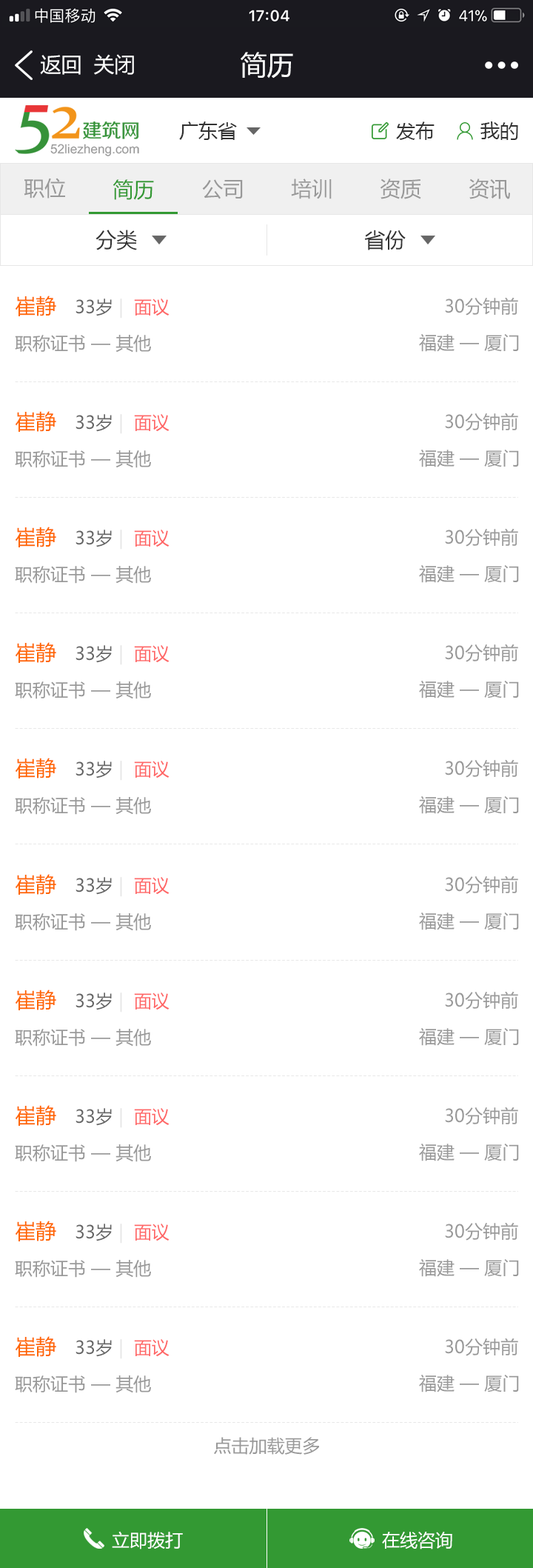
<style>
.page{position:relative;width:533px;height:1568px;background:#ffffff}
.page>*{position:absolute;margin:0}
.t1{font:26.7px "MicrosoftYaHei";color:#ffffff}
.t2{font:20.7px "MicrosoftYaHei";color:#ffffff}
.t3{font:19.3px "MicrosoftYaHei";color:#333333}
.t4{font:20.7px "MicrosoftYaHei";color:#999999}
.t5{font:20.7px "MicrosoftYaHei";color:#339933}
.t6{font:20.7px "MicrosoftYaHei";color:#333333}
.t7{font:20.7px "MicrosoftYaHei";color:#ff6600}
.t8{font:17.8px "MicrosoftYaHei";color:#666666}
.t9{font:17.8px "MicrosoftYaHei";color:#e7e7e7}
.t10{font:17.8px "MicrosoftYaHei";color:#ff6666}
.t11{font:17.8px "MicrosoftYaHei";color:#999999}
.t12{font:17.8px "MicrosoftYaHei";color:#ffffff}
</style>
<div class="page">
<p class="t1" style="left:241px;top:52px;width:52px;height:27px">简历</p>
<p class="t2" style="left:40px;top:55px;width:41px;height:20px">返回</p>
<p class="t2" style="left:94px;top:54px;width:40px;height:21px">关闭</p>
<p class="t3" style="left:179px;top:121px;width:58px;height:19px">广东省</p>
<p class="t3" style="left:396px;top:121px;width:39px;height:19px">发布</p>
<p class="t3" style="left:481px;top:121px;width:37px;height:19px">我的</p>
<p class="t4" style="left:24px;top:178px;width:41px;height:20px">职位</p>
<p class="t5" style="left:113px;top:179px;width:41px;height:21px">简历</p>
<p class="t4" style="left:202px;top:179px;width:41px;height:20px">公司</p>
<p class="t4" style="left:291px;top:179px;width:41px;height:20px">培训</p>
<p class="t4" style="left:380px;top:179px;width:41px;height:20px">资质</p>
<p class="t4" style="left:469px;top:179px;width:41px;height:20px">资讯</p>
<p class="t6" style="left:96px;top:230px;width:41px;height:20px">分类</p>
<p class="t6" style="left:364px;top:230px;width:42px;height:20px">省份</p>
<p class="t7" style="left:15px;top:296px;width:41px;height:20px">崔静</p>
<p class="t8" style="left:76px;top:298px;width:94px;height:20px">33岁 <span class="t9">|  </span><span class="t10">面议</span></p>
<p class="t11" style="left:445px;top:297px;width:73px;height:19px">30分钟前</p>
<p class="t11" style="left:15px;top:335px;width:136px;height:18px">职称证书 — 其他</p>
<p class="t11" style="left:419px;top:334px;width:100px;height:18px">福建 — 厦门</p>
<p class="t7" style="left:15px;top:411px;width:41px;height:21px">崔静</p>
<p class="t11" style="left:445px;top:413px;width:73px;height:18px">30分钟前</p>
<p class="t8" style="left:76px;top:414px;width:94px;height:20px">33岁 <span class="t9">|  </span><span class="t10">面议</span></p>
<p class="t11" style="left:419px;top:450px;width:100px;height:17px">福建 — 厦门</p>
<p class="t11" style="left:15px;top:450px;width:136px;height:18px">职称证书 — 其他</p>
<p class="t7" style="left:15px;top:527px;width:41px;height:20px">崔静</p>
<p class="t8" style="left:76px;top:530px;width:94px;height:20px">33岁 <span class="t9">|  </span><span class="t10">面议</span></p>
<p class="t11" style="left:445px;top:528px;width:73px;height:19px">30分钟前</p>
<p class="t11" style="left:15px;top:566px;width:136px;height:18px">职称证书 — 其他</p>
<p class="t11" style="left:419px;top:565px;width:100px;height:18px">福建 — 厦门</p>
<p class="t7" style="left:15px;top:642px;width:41px;height:21px">崔静</p>
<p class="t8" style="left:76px;top:645px;width:94px;height:20px">33岁 <span class="t9">|  </span><span class="t10">面议</span></p>
<p class="t11" style="left:445px;top:644px;width:73px;height:18px">30分钟前</p>
<p class="t11" style="left:15px;top:681px;width:136px;height:18px">职称证书 — 其他</p>
<p class="t11" style="left:419px;top:681px;width:100px;height:17px">福建 — 厦门</p>
<p class="t7" style="left:15px;top:758px;width:41px;height:20px">崔静</p>
<p class="t8" style="left:76px;top:761px;width:94px;height:20px">33岁 <span class="t9">|  </span><span class="t10">面议</span></p>
<p class="t11" style="left:445px;top:759px;width:73px;height:19px">30分钟前</p>
<p class="t11" style="left:15px;top:797px;width:136px;height:18px">职称证书 — 其他</p>
<p class="t11" style="left:419px;top:796px;width:100px;height:18px">福建 — 厦门</p>
<p class="t7" style="left:15px;top:874px;width:41px;height:21px">崔静</p>
<p class="t8" style="left:76px;top:877px;width:94px;height:20px">33岁 <span class="t9">|  </span><span class="t10">面议</span></p>
<p class="t11" style="left:445px;top:875px;width:73px;height:19px">30分钟前</p>
<p class="t11" style="left:15px;top:913px;width:136px;height:18px">职称证书 — 其他</p>
<p class="t11" style="left:419px;top:913px;width:100px;height:17px">福建 — 厦门</p>
<p class="t7" style="left:15px;top:990px;width:41px;height:20px">崔静</p>
<p class="t8" style="left:76px;top:992px;width:94px;height:20px">33岁 <span class="t9">|  </span><span class="t10">面议</span></p>
<p class="t11" style="left:445px;top:991px;width:73px;height:19px">30分钟前</p>
<p class="t11" style="left:15px;top:1029px;width:136px;height:18px">职称证书 — 其他</p>
<p class="t11" style="left:419px;top:1028px;width:100px;height:18px">福建 — 厦门</p>
<p class="t7" style="left:15px;top:1105px;width:41px;height:21px">崔静</p>
<p class="t8" style="left:76px;top:1108px;width:94px;height:20px">33岁 <span class="t9">|  </span><span class="t10">面议</span></p>
<p class="t11" style="left:445px;top:1107px;width:73px;height:18px">30分钟前</p>
<p class="t11" style="left:15px;top:1144px;width:136px;height:18px">职称证书 — 其他</p>
<p class="t11" style="left:419px;top:1144px;width:100px;height:17px">福建 — 厦门</p>
<p class="t7" style="left:15px;top:1221px;width:41px;height:20px">崔静</p>
<p class="t8" style="left:76px;top:1224px;width:94px;height:20px">33岁 <span class="t9">|  </span><span class="t10">面议</span></p>
<p class="t11" style="left:445px;top:1222px;width:73px;height:19px">30分钟前</p>
<p class="t11" style="left:15px;top:1260px;width:136px;height:18px">职称证书 — 其他</p>
<p class="t11" style="left:419px;top:1259px;width:100px;height:18px">福建 — 厦门</p>
<p class="t7" style="left:15px;top:1336px;width:41px;height:21px">崔静</p>
<p class="t11" style="left:445px;top:1338px;width:73px;height:18px">30分钟前</p>
<p class="t8" style="left:76px;top:1339px;width:94px;height:20px">33岁 <span class="t9">|  </span><span class="t10">面议</span></p>
<p class="t11" style="left:15px;top:1375px;width:136px;height:18px">职称证书 — 其他</p>
<p class="t11" style="left:419px;top:1375px;width:100px;height:17px">福建 — 厦门</p>
<p class="t11" style="left:214px;top:1437px;width:105px;height:18px">点击加载更多</p>
<p class="t12" style="left:112px;top:1531px;width:71px;height:18px">立即拨打</p>
<p class="t12" style="left:382px;top:1532px;width:71px;height:17px">在线咨询</p>
</div>
